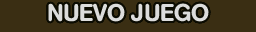
<style>
.page{position:relative;width:256px;height:32px;background:#3a2e13}
.page>*{position:absolute;margin:0}
.t1{font:24px "AK13-Medium";color:#dcdcdc}
</style>
<div class="page">
<p class="t1" style="left:48px;top:3px;width:161px;height:19px">NUEVO JUEGO</p>
</div>
